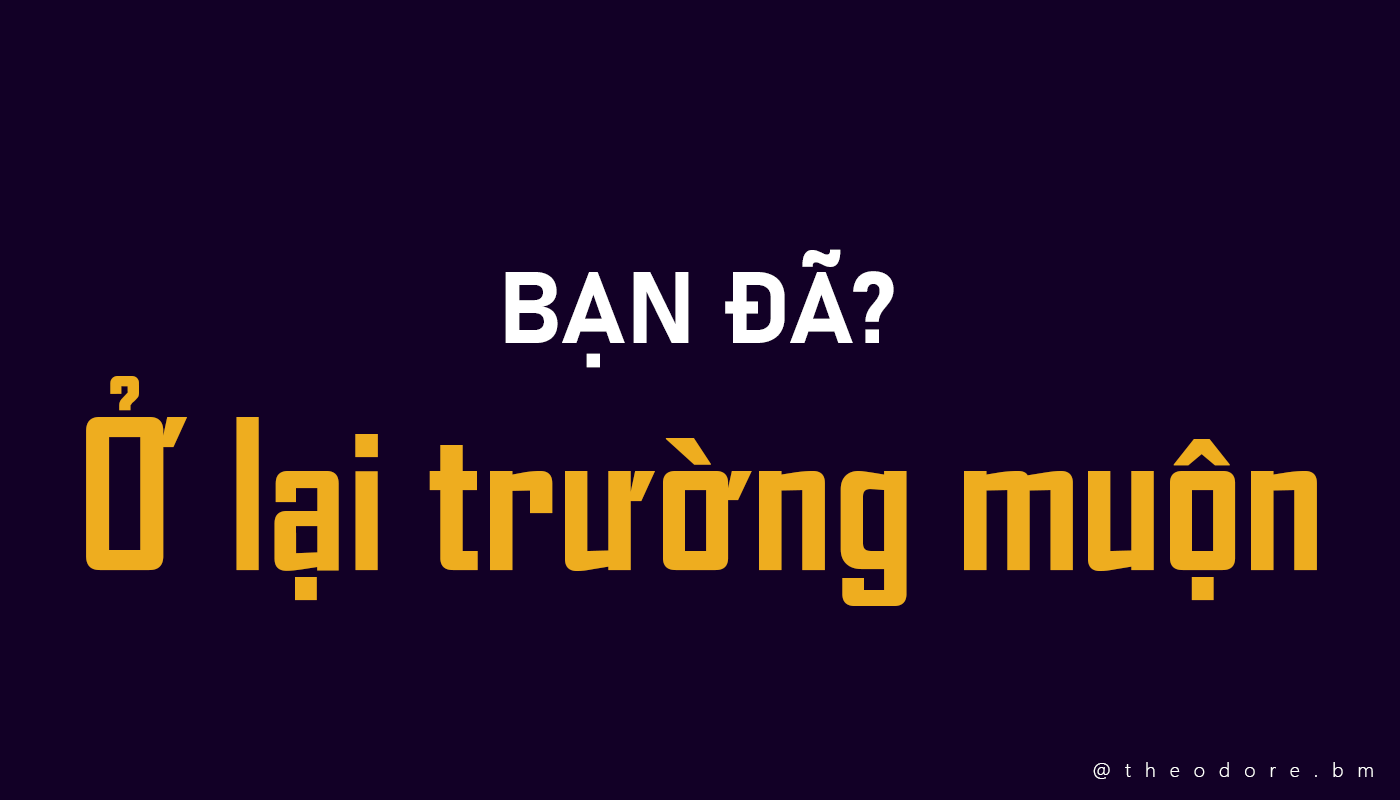
<style>
.page{position:relative;width:1400px;height:800px;background:#120026}
.page>*{position:absolute;margin:0}
.t1{font:100px "Bahnschrift-Bold";color:#ffffff}
.t2{font:200px "SVN-AgencyFBbold";color:#eead1f}
.t3{font:20px "SegoeUI-Light";letter-spacing:0.7em;color:#ffffff}
</style>
<div class="page">
<p class="t1" style="left:505px;top:249px;width:389px;height:119px">BẠN ĐÃ?</p>
<p class="t2" style="left:86px;top:376px;width:1231px;height:230px">Ở lại trường muộn</p>
<p class="t3" style="left:1093px;top:762px;width:280px;height:17px">@theodore.bm</p>
</div>
